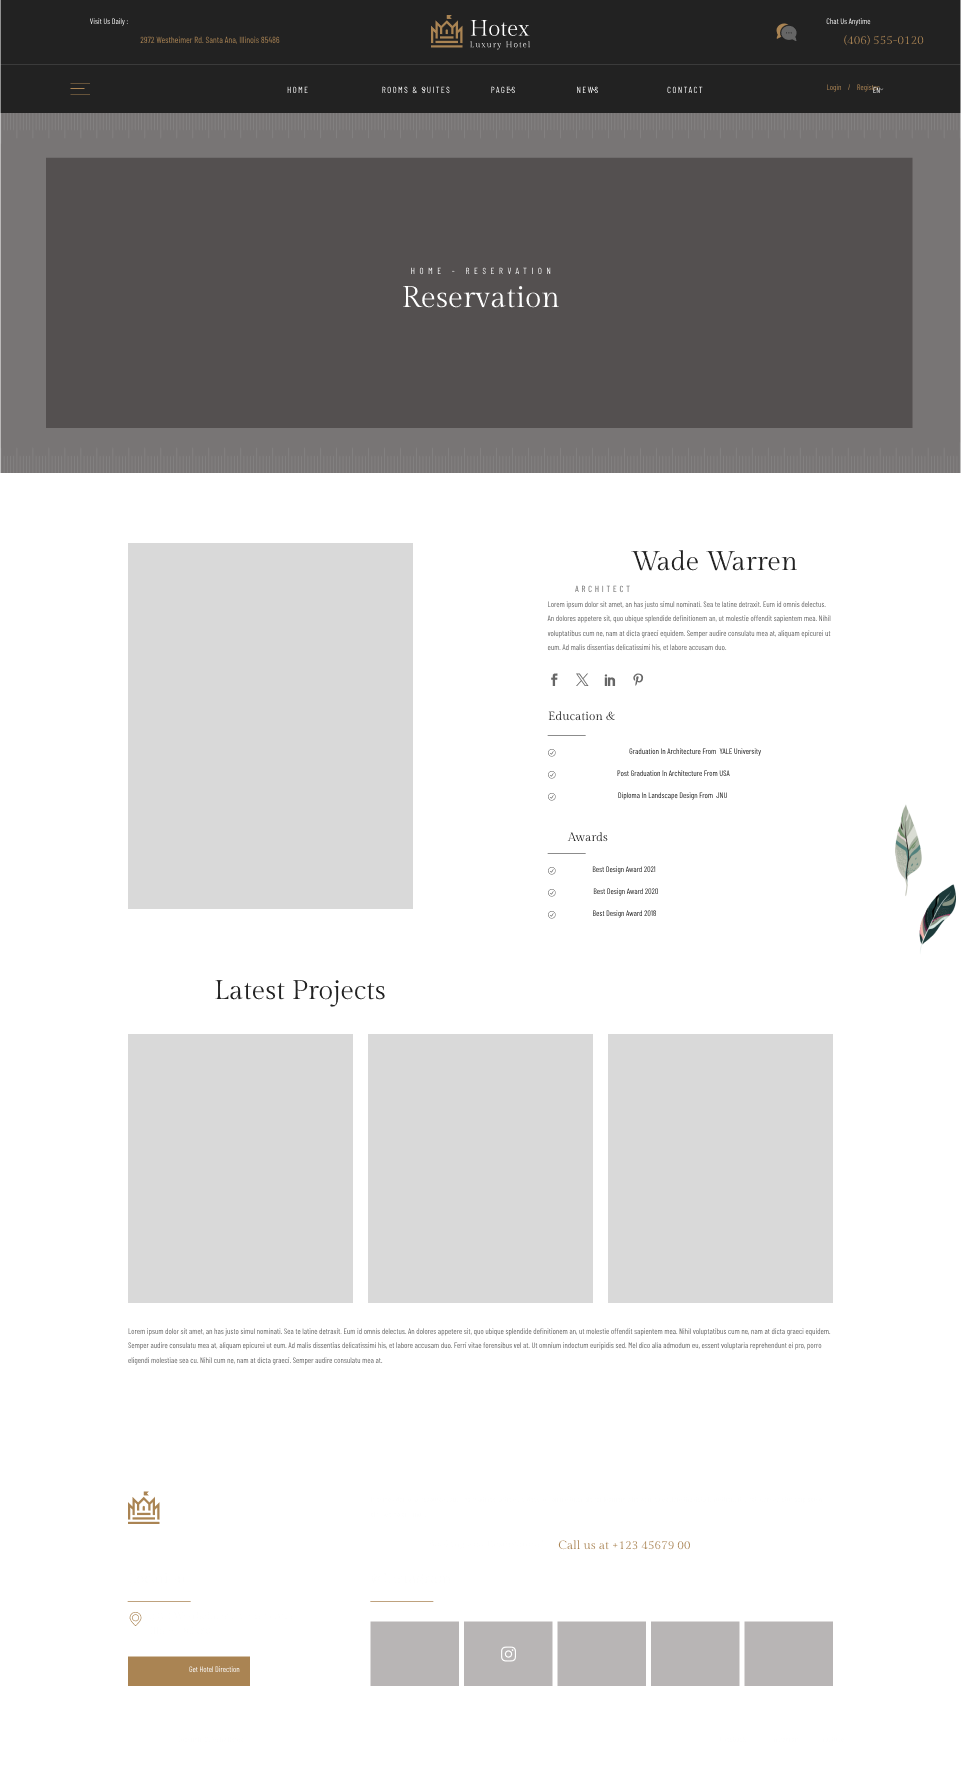
<style>
.page{position:relative;width:961px;height:1767px;background:#ffffff}
.page>*{position:absolute;margin:0}
.t1{font:8px "BarlowCondensed-Regular"}
.t2{font:9px "BarlowCondensed-Regular";color:#aa8453}
.t3{font:12px "GildaDisplay-Regular";color:#aa8453}
.t4{font:9px "BarlowCondensed-Regular";letter-spacing:0.15em;text-transform:uppercase}
.t5{font:9px "BarlowCondensed-Regular";letter-spacing:0.5em;color:#ffffff;text-transform:uppercase}
.t6{font:30px "GildaDisplay-Regular";color:#ffffff}
.t7{font:27px "GildaDisplay-Regular";color:#222222}
.t8{font:9px "BarlowCondensed-Regular";letter-spacing:0.3em;text-transform:uppercase}
.t9{font:8px/14.5px "BarlowCondensed-Regular";color:#666666}
.t10{font:12px "GildaDisplay-Regular";color:#222222}
.t11{font:8px/14.5px "BarlowCondensed-Regular"}
</style>
<div class="page">
<p class="t1" style="left:90px;top:18px;width:38px;height:8px">Visit Us Daily :</p>
<p class="t1" style="left:826px;top:18px;width:45px;height:8px">Chat Us Anytime</p>
<p class="t2" style="left:140px;top:36px;width:140px;height:8px">2972 Westheimer Rd. Santa Ana, Illinois 85486</p>
<p class="t3" style="left:844px;top:35px;width:80px;height:11px">(406) 555-0120</p>
<p class="t4" style="left:287px;top:86px;width:21px;height:8px">Home</p>
<p class="t4" style="left:382px;top:86px;width:68px;height:8px">Rooms &amp; Suites</p>
<p class="t4" style="left:491px;top:86px;width:24px;height:8px">Pages</p>
<p class="t4" style="left:577px;top:86px;width:21px;height:8px">News</p>
<p class="t4" style="left:667px;top:86px;width:36px;height:8px">Contact</p>
<p class="t1" style="left:827px;top:84px;width:53px;height:8px">Login    /    Register</p>
<p class="t1" style="left:873px;top:87px;width:7px;height:6px">EN</p>
<p class="t5" style="left:411px;top:267px;width:140px;height:8px">Home - Reservation</p>
<p class="t6" style="left:403px;top:286px;width:157px;height:22px">Reservation</p>
<p class="t7" style="left:631px;top:550px;width:167px;height:21px">Wade Warren</p>
<p class="t8" style="left:575px;top:585px;width:55px;height:8px">Architect</p>
<p class="t9" style="left:547px;top:601px;width:284px;height:50px">Lorem ipsum dolor sit amet, an has justo simul nominati. Sea te latine detraxit. Eum id omnis delectus. An dolores appetere sit, quo ubique splendide definitionem an, ut molestie offendit sapientem mea. Nihil voluptatibus cum ne, nam at dicta graeci equidem. Semper audire consulatu mea at, aliquam epicurei ut eum. Ad malis dissentias delicatissimi his, et labore accusam duo.</p>
<p class="t10" style="left:548px;top:711px;width:68px;height:10px">Education &amp; Qualification</p>
<p class="t1" style="left:629px;top:748px;width:132px;height:8px">Graduation In Architecture From  YALE University</p>
<p class="t1" style="left:617px;top:770px;width:113px;height:7px">Post Graduation In Architecture From USA</p>
<p class="t1" style="left:618px;top:792px;width:109px;height:8px">Diploma In Landscape Design From  JNU</p>
<p class="t10" style="left:567px;top:832px;width:41px;height:10px">Awards</p>
<p class="t1" style="left:592px;top:866px;width:64px;height:8px">Best Design Award 2021</p>
<p class="t1" style="left:593px;top:888px;width:65px;height:8px">Best Design Award 2020</p>
<p class="t1" style="left:593px;top:910px;width:63px;height:8px">Best Design Award 2018</p>
<p class="t7" style="left:215px;top:980px;width:170px;height:27px">Latest Projects</p>
<p class="t11" style="left:128px;top:1328px;width:703px;height:37px">Lorem ipsum dolor sit amet, an has justo simul nominati. Sea te latine detraxit. Eum id omnis delectus. An dolores appetere sit, quo ubique splendide definitionem an, ut molestie offendit sapientem mea. Nihil voluptatibus cum ne, nam at dicta graeci equidem. Semper audire consulatu mea at, aliquam epicurei ut eum. Ad malis dissentias delicatissimi his, et labore accusam duo. Ferri vitae forensibus vel at. Ut omnium indoctum euripidis sed. Mel dico alia admodum eu, essent voluptaria reprehendunt ei pro, porro eligendi molestiae sea cu. Nihil cum ne, nam at dicta graeci. Semper audire consulatu mea at.</p>
<p class="t3" style="left:558px;top:1540px;width:132px;height:10px">Call us at +123 45679 00</p>
<p class="t1" style="left:189px;top:1666px;width:51px;height:7px">Get Hotel Direction</p>
</div>
